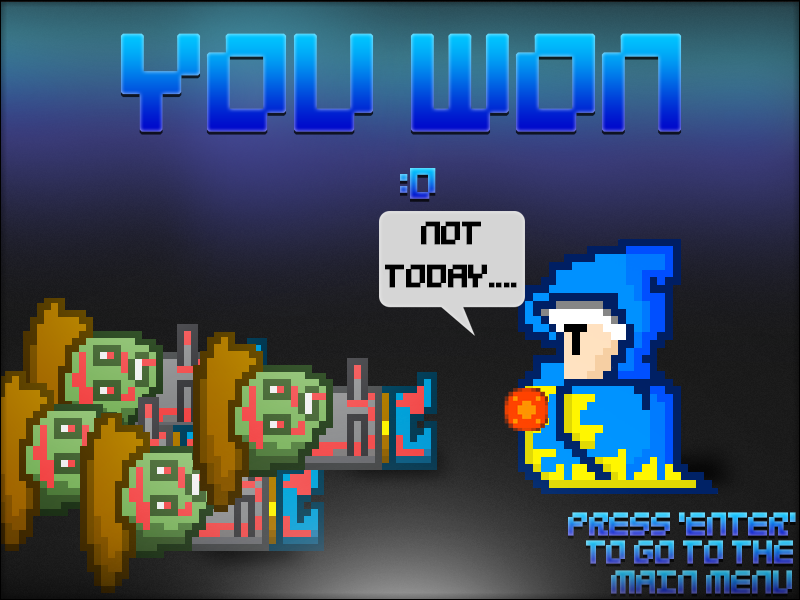
<style>
.page{position:relative;width:800px;height:600px}
.page>*{position:absolute;margin:0}
.t1{font:150px "5Mikropix";letter-spacing:-0.075em;font-weight:bold}
.t2{font:48px "5Mikropix";letter-spacing:-0.075em;font-weight:bold}
.t3{font:36px "5Mikropix";letter-spacing:-0.075em;color:#000000;font-weight:bold}
.t4{font:36px "5Mikropix";letter-spacing:-0.075em;font-weight:bold}
</style>
<div class="page">
<p class="t1" style="left:120px;top:33px;width:562px;height:99px">YOU WON</p>
<p class="t2" style="left:400px;top:168px;width:36px;height:31px">:D</p>
<p class="t3" style="left:385px;top:221px;width:132px;height:67px;text-align:center">NOT TODAY....</p>
<p class="t4" style="left:568px;top:512px;width:228px;height:24px">PRESS ‘ENTER’</p>
<p class="t4" style="left:586px;top:540px;width:207px;height:24px">TO GO TO THE</p>
<p class="t4" style="left:611px;top:570px;width:181px;height:24px">MAIN MENU</p>
</div>
